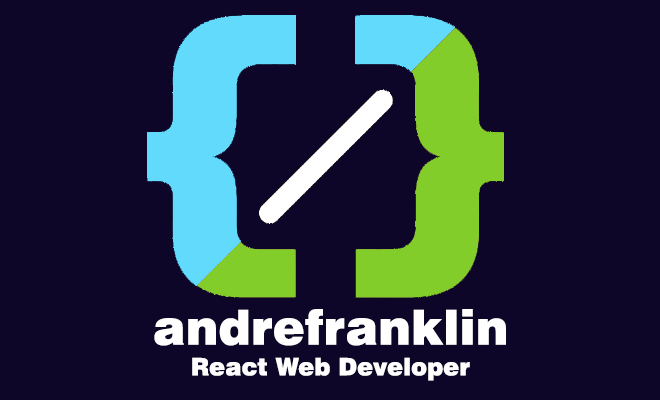
<style>
.page{position:relative;width:660px;height:400px;background:#0d0628}
.page>*{position:absolute;margin:0}
.t1{font:48px "Swiss721BT-Black";color:#ffffff}
.t2{font:24px "Swiss721BT-Black";color:#ffffff}
</style>
<div class="page">
<p class="t1" style="left:154px;top:309px;width:352px;height:37px">andrefranklin</p>
<p class="t2" style="left:192px;top:357px;width:278px;height:24px">React Web Developer</p>
</div>
